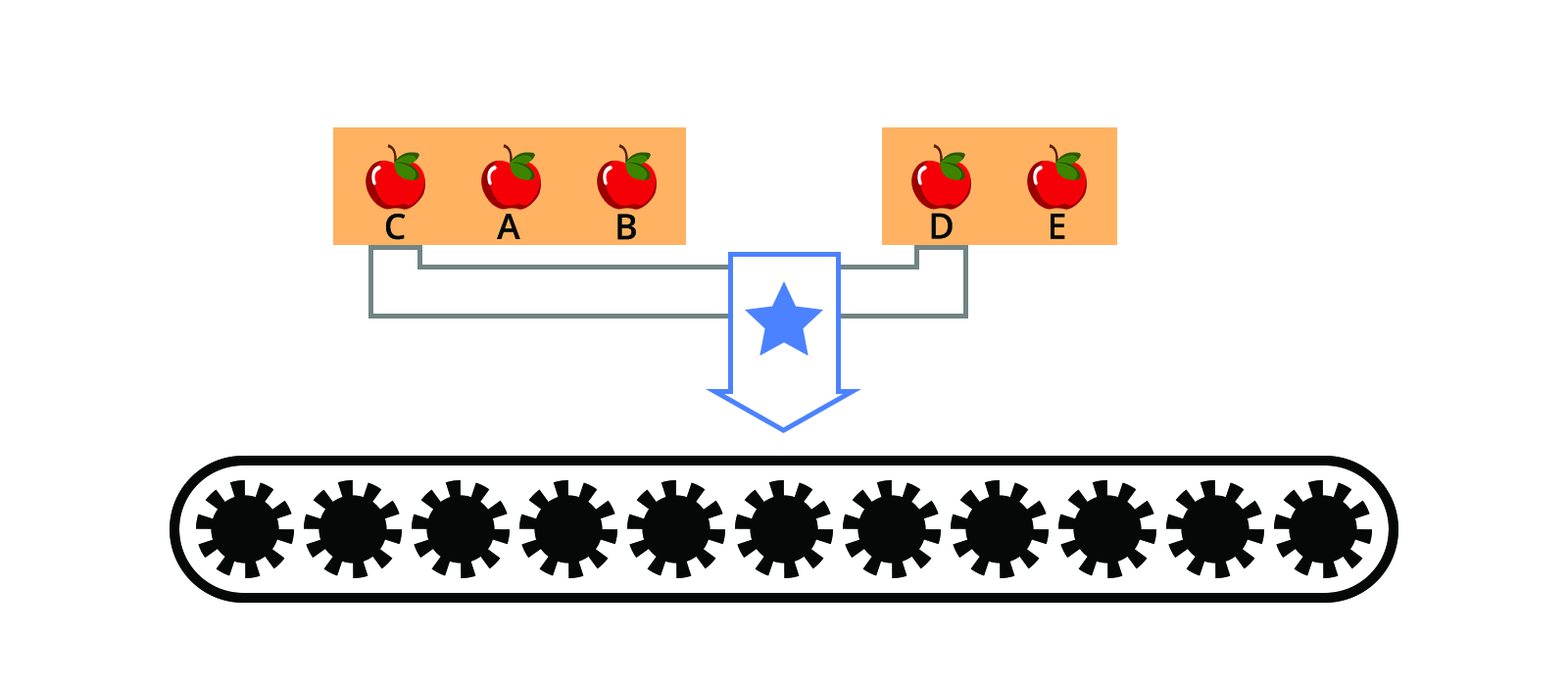
<style>
.page{position:relative;width:1568px;height:686px;background:#ffffff}
.page>*{position:absolute;margin:0}
.t1{font:35.3px "OpenSans-SemiBold";letter-spacing:0.12em;color:#060808}
</style>
<div class="page">
<p class="t1" style="left:385px;top:214px;width:21px;height:26px">C</p>
<p class="t1" style="left:497px;top:214px;width:23px;height:25px">A</p>
<p class="t1" style="left:617px;top:214px;width:19px;height:26px">B</p>
<p class="t1" style="left:931px;top:213px;width:22px;height:26px">D</p>
<p class="t1" style="left:1051px;top:214px;width:14px;height:25px">E</p>
</div>
